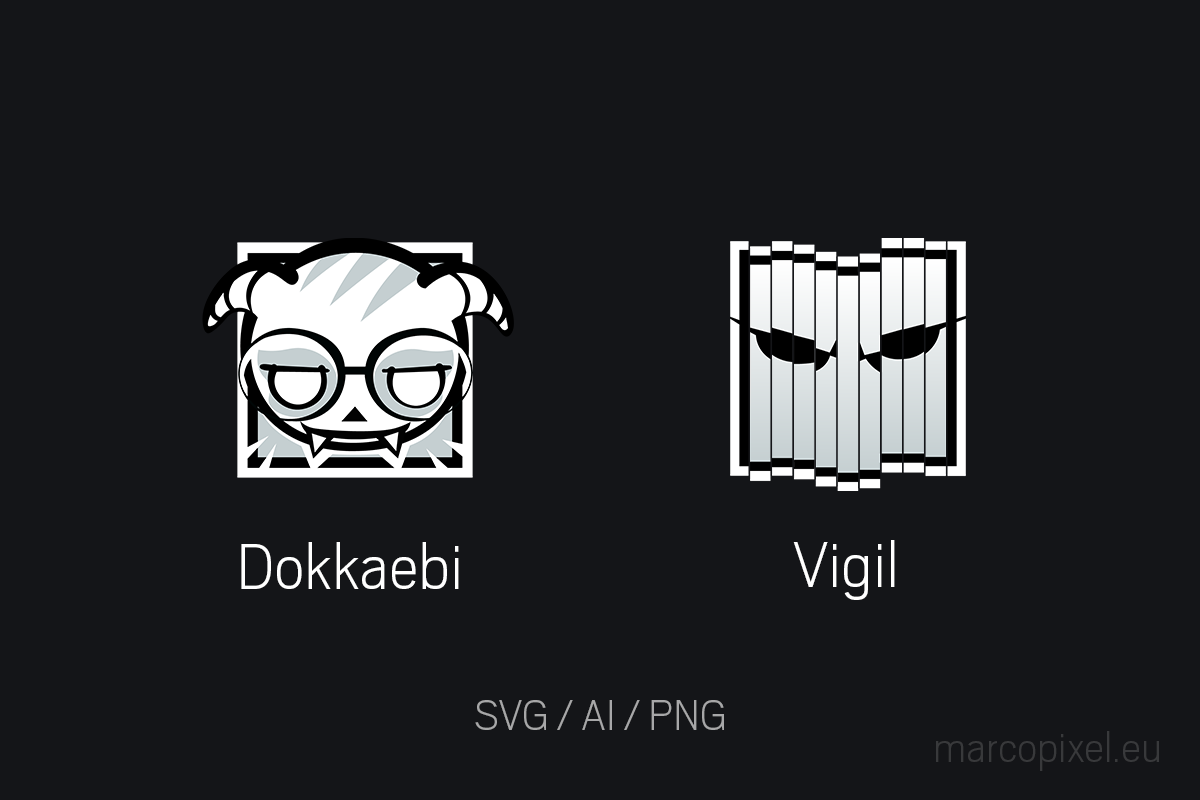
<style>
.page{position:relative;width:1200px;height:800px;background:#141518}
.page>*{position:absolute;margin:0}
.t1{font:72px "Scout-ExtraLight";color:#ffffff}
.t2{font:48px "Scout-ExtraLight";color:#a7a7a8}
.t3{font:48px "Scout-ExtraLight";color:#38393b}
</style>
<div class="page">
<p class="t1" style="left:241px;top:542px;width:218px;height:47px">Dokkaebi</p>
<p class="t1" style="left:793px;top:540px;width:102px;height:60px">Vigil</p>
<p class="t2" style="left:475px;top:700px;width:249px;height:30px">SVG / AI / PNG</p>
<p class="t3" style="left:936px;top:731px;width:223px;height:40px">marcopixel.eu</p>
</div>
